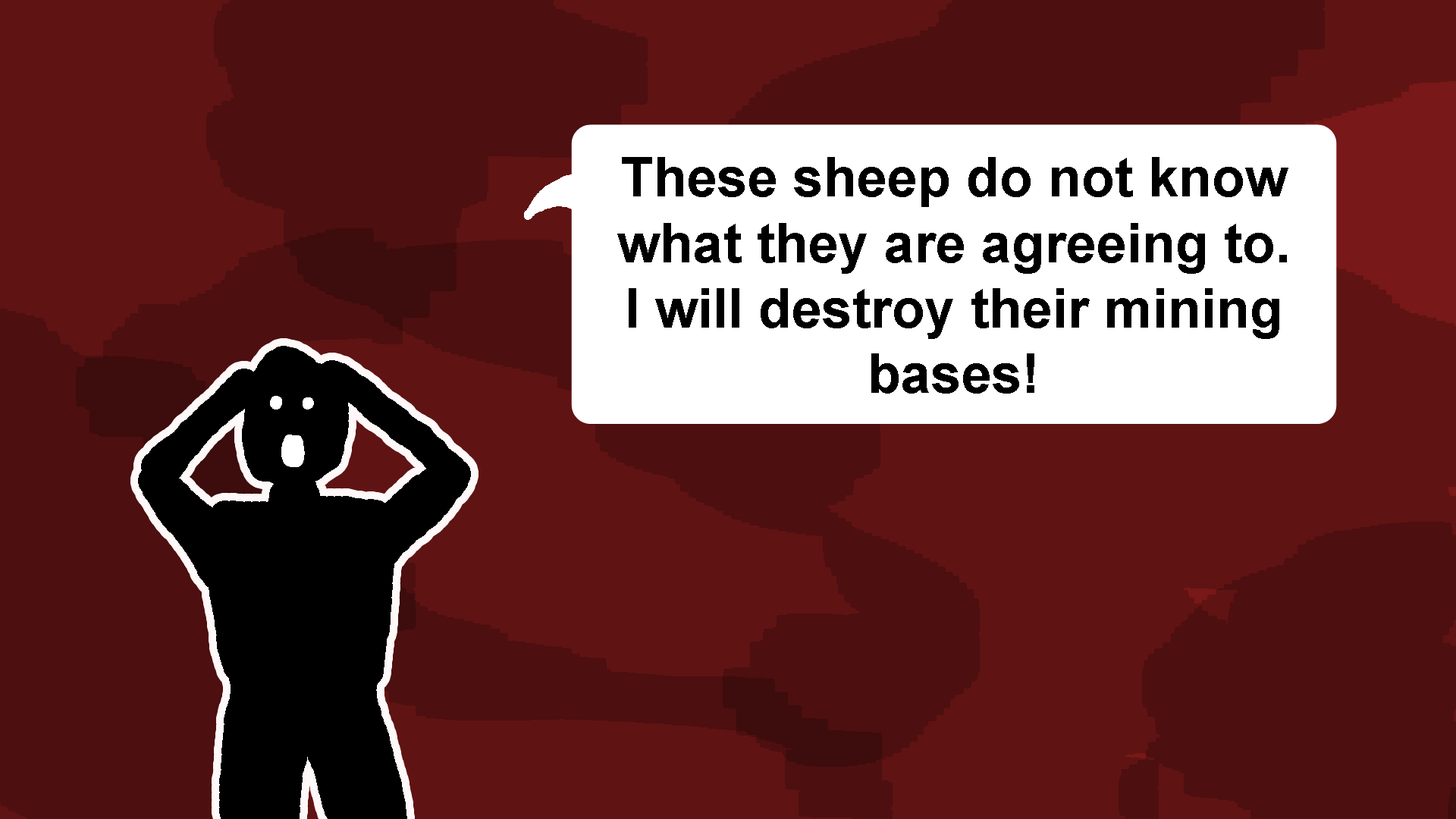
<style>
.page{position:relative;width:1456px;height:819px;background:#4d0f0f}
.page>*{position:absolute;margin:0}
.t1{font:54.6px "Arial-BoldMT";color:#000000}
</style>
<div class="page">
<p class="t1" style="left:617px;top:157px;width:671px;height:237px;text-align:center">These sheep do not know<br>what they are agreeing to.<br>I will destroy their mining<br>bases!</p>
</div>
